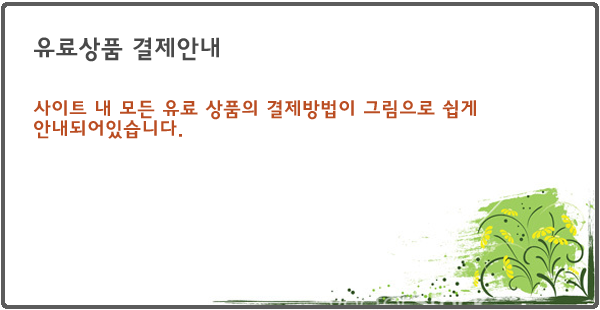
<style>
.page{position:relative;width:600px;height:310px;background:#ffffff}
.page>*{position:absolute;margin:0}
.t1{font:25px "HaanYGodic24";color:#494949}
.t2{font:20px/20px "HaanYGodic24";color:#ba4d22}
</style>
<div class="page">
<p class="t1" style="left:34px;top:37px;width:185px;height:25px">유료상품 결제안내</p>
<p class="t2" style="left:33px;top:100px;width:443px;height:39px">사이트 내 모든 유료 상품의 결제방법이 그림으로 쉽게 안내되어있습니다.</p>
</div>
